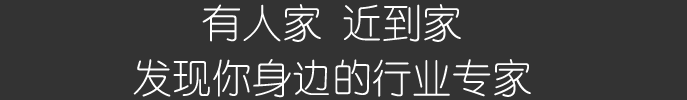
<style>
.page{position:relative;width:687px;height:100px;background:#333333}
.page>*{position:absolute;margin:0}
.t1{font:40px/55px "YouYuan";color:#ffffff}
</style>
<div class="page">
<p class="t1" style="left:133px;top:4px;width:398px;height:94px;text-align:center">有人家 近到家<br>发现你身边的行业专家</p>
</div>
